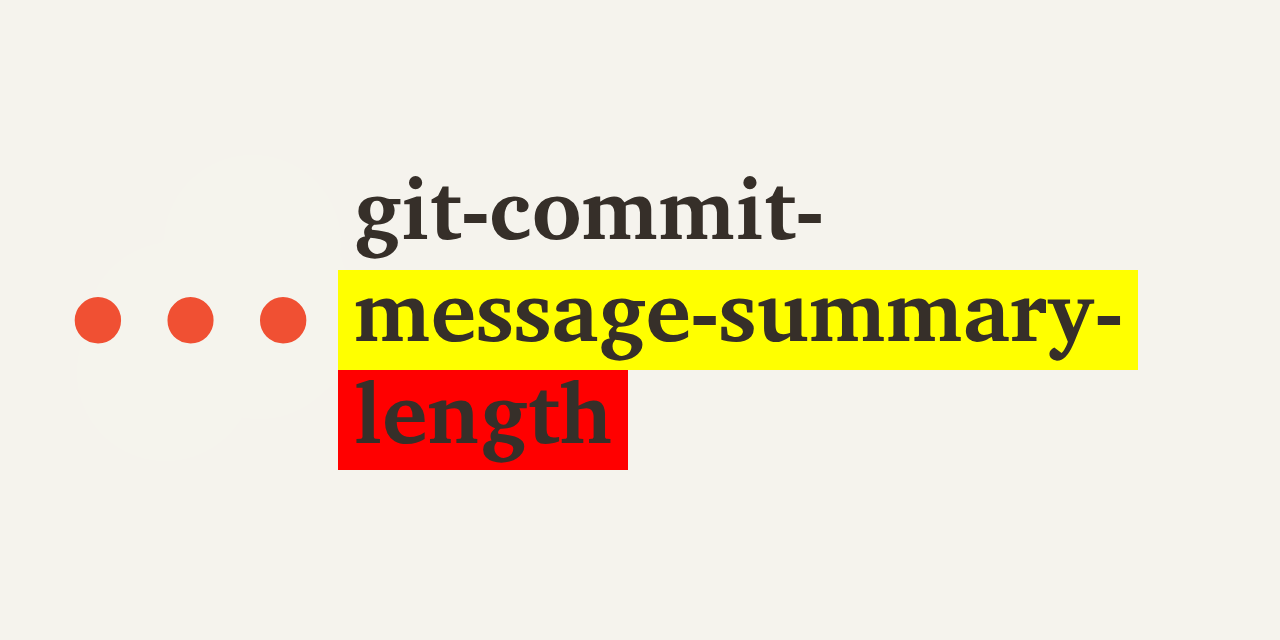
<style>
.page{position:relative;width:1280px;height:640px;background:#f5f3ed}
.page>*{position:absolute;margin:0}
.t1{font:85px "Georgia-Bold";color:#362f29}
.t2{font:277.8px "Georgia-Bold";color:#f05033}
</style>
<div class="page">
<p class="t1" style="left:355px;top:176px;width:766px;height:287px">git-commit-<br>message-summary-<br>length</p>
<p class="t2" style="left:74px;top:297px;width:233px;height:47px">…</p>
</div>
